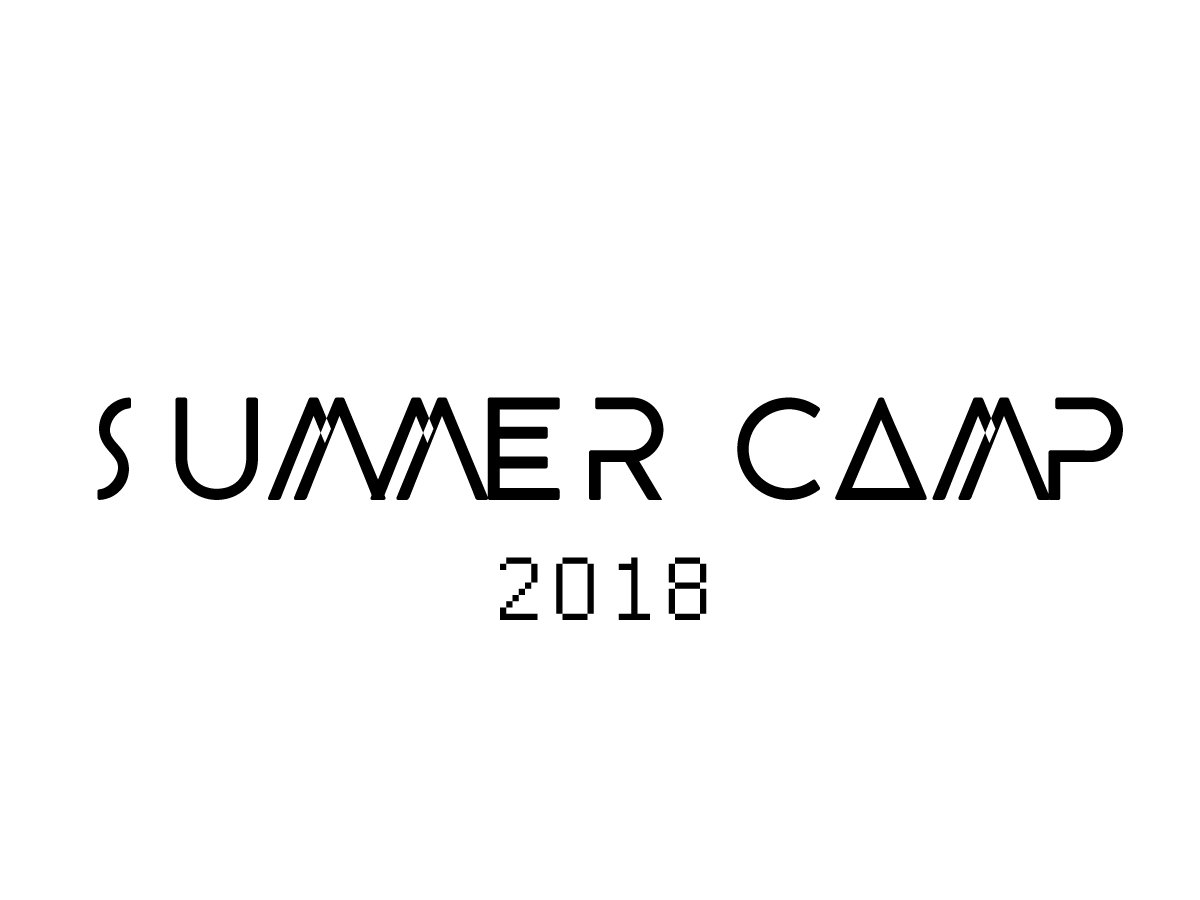
<style>
.page{position:relative;width:1200px;height:900px;background:#ffffff}
.page>*{position:absolute;margin:0}
.t1{font:100px "BEYNO";color:#000000}
.t2{font:100px "Courier";color:#000000}
</style>
<div class="page">
<p class="t1" style="left:97px;top:397px;width:1026px;height:223px;text-align:center">SUMMER CAMP <span class="t2">2018</span></p>
</div>
